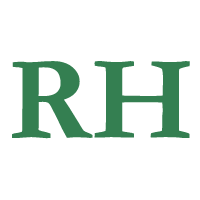
<style>
.page{position:relative;width:200px;height:200px;background:#ffffff}
.page>*{position:absolute;margin:0}
.t1{font:120px "Garamond-Bold";color:#347f51}
</style>
<div class="page">
<p class="t1" style="left:12px;top:61px;width:178px;height:78px">RH</p>
</div>
